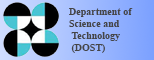
<style>
.page{position:relative;width:154px;height:60px}
.page>*{position:absolute;margin:0}
.t1{font:10px "TimesNewRomanPS-BoldMT";color:#454545}
</style>
<div class="page">
<p class="t1" style="left:69px;top:8px;width:64px;height:45px;text-align:right">Department of<br>Science and<br>Technology <br>(DOST)</p>
</div>
